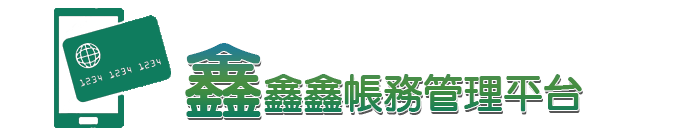
<style>
.page{position:relative;width:680px;height:136px;background:#ffffff}
.page>*{position:absolute;margin:0}
.t1{font:40px "DFLiYuan-Bd-WIN-BF"}
.t2{font:80px "DFLiYuan-Bd-WIN-BF"}
</style>
<div class="page">
<p class="t1" style="left:185px;top:43px;width:397px;height:74px"><span class="t2">鑫</span>鑫鑫帳務管理平台</p>
</div>
